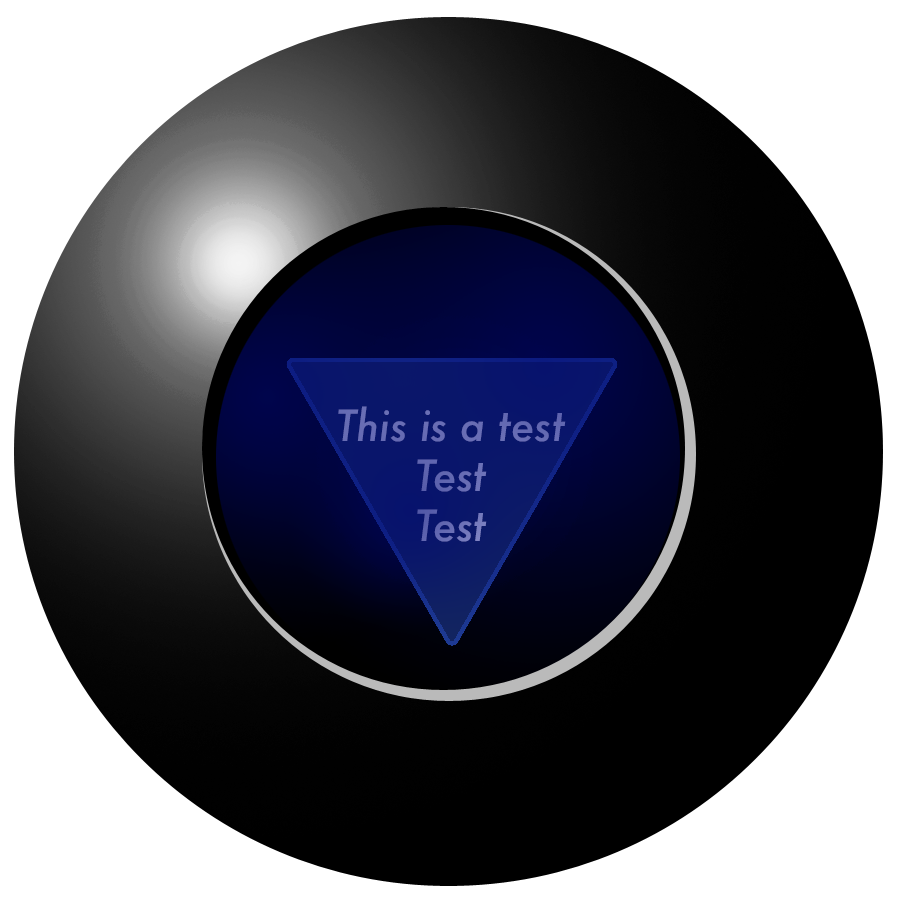
<style>
.page{position:relative;width:900px;height:900px;background:#ffffff}
.page>*{position:absolute;margin:0}
.t1{font:41.7px "Futura-MediumItalic";color:#676cb4}
</style>
<div class="page">
<p class="t1" style="left:338px;top:406px;width:228px;height:136px;text-align:center">This is a test<br>Test<br>Test</p>
</div>
